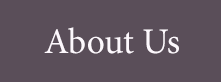
<style>
.page{position:relative;width:221px;height:82px;background:#5a4e59}
.page>*{position:absolute;margin:0}
.t1{font:36px "MinionPro-Regular";color:#fdf8fd}
</style>
<div class="page">
<p class="t1" style="left:44px;top:27px;width:135px;height:27px">About Us</p>
</div>
